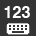
<style>
.page{position:relative;width:36px;height:36px;background:#333333}
.page>*{position:absolute;margin:0}
.t1{font:16px "Swiss721BT-Bold";color:#ffffff}
</style>
<div class="page">
<p class="t1" style="left:4px;top:6px;width:26px;height:12px">123</p>
</div>
